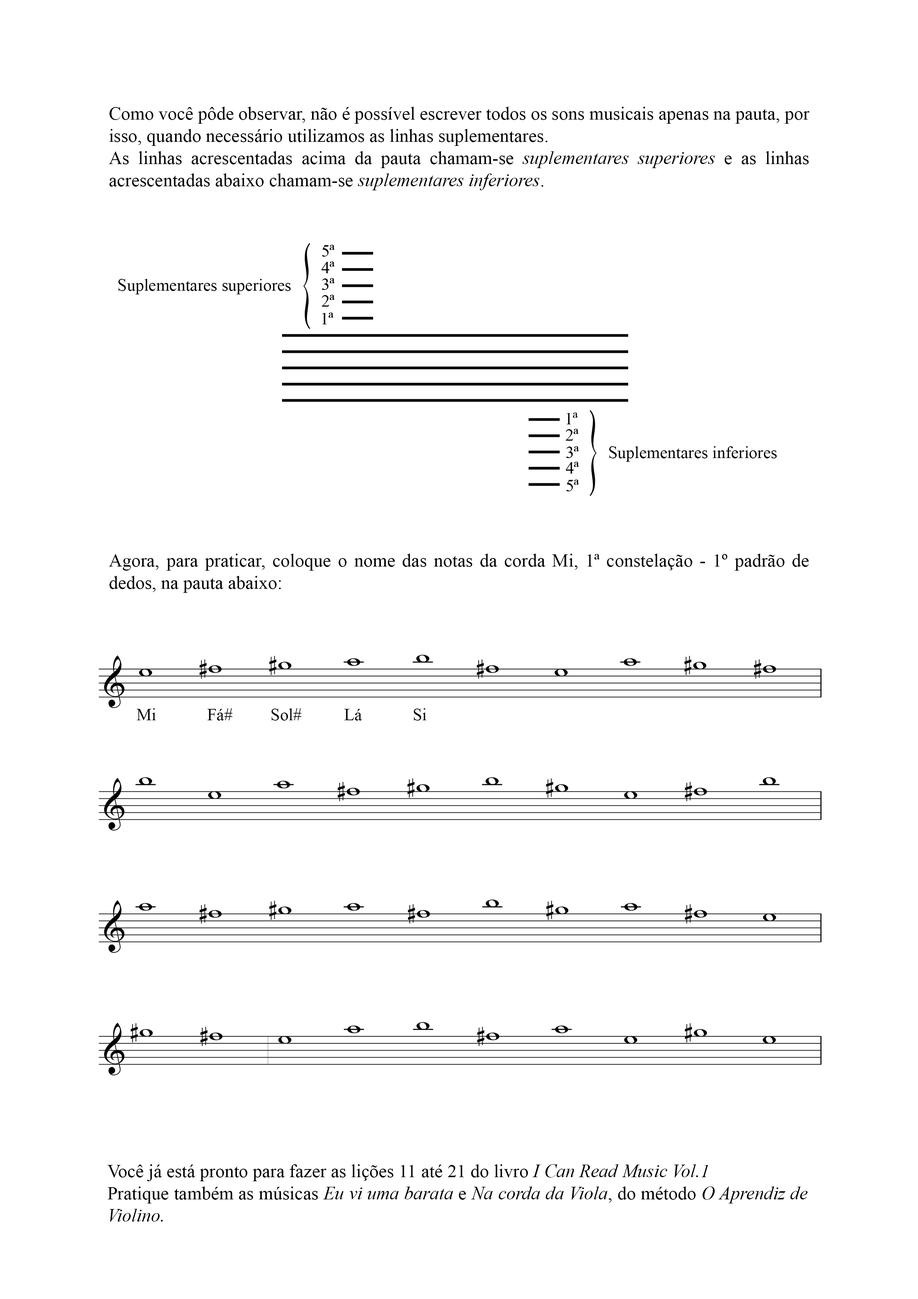
<style>
.page{position:relative;width:918px;height:1299px;background:#ffffff}
.page>*{position:absolute;margin:0}
.t1{font:18.5px "TimesNewRomanPSMT";color:#000000}
.t2{font:18.5px "TimesNewRomanPS-ItalicMT";color:#000000}
.t3{font:17px "TimesNewRomanPSMT";color:#000000}
</style>
<div class="page">
<p class="t1" style="left:109px;top:107px;width:701px;height:83px;text-align:justify">Como você pôde observar, não é possível escrever todos os sons musicais apenas na pauta, por isso, quando necessário utilizamos as linhas suplementares.<br>As linhas acrescentadas acima da pauta chamam-se <span class="t2">suplementares superiores</span> e as linhas acrescentadas abaixo chamam-se <span class="t2">suplementares inferiores</span>.</p>
<p class="t3" style="left:118px;top:279px;width:173px;height:15px">Suplementares superiores</p>
<p class="t3" style="left:609px;top:446px;width:168px;height:16px">Suplementares inferiores</p>
<p class="t1" style="left:109px;top:553px;width:700px;height:40px;text-align:justify">Agora, para praticar, coloque o nome das notas da corda Mi, 1ª constelação - 1º padrão de dedos, na pauta abaixo:</p>
<p class="t1" style="left:107px;top:1164px;width:701px;height:58px;text-align:justify">Você já está pronto para fazer as lições 11 até 21 do livro <span class="t2">I Can Read Music Vol.1<br></span>Pratique também as músicas <span class="t2">Eu vi uma barata </span>e<span class="t2"> Na corda da Viola</span>, do método <span class="t2">O Aprendiz de Violino.</span></p>
</div>
